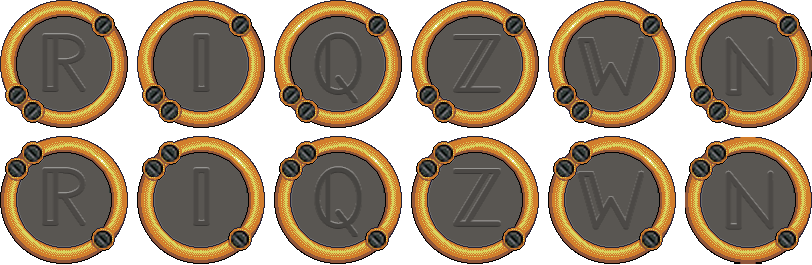
<style>
.page{position:relative;width:812px;height:265px;background:#595652}
.page>*{position:absolute;margin:0}
.t1{font:83.3px "jsMath-bbold10";letter-spacing:0.06em;color:#4c4946}
</style>
<div class="page">
<p class="t1" style="left:43px;top:34px;width:42px;height:57px">R</p>
<p class="t1" style="left:194px;top:34px;width:15px;height:57px">I</p>
<p class="t1" style="left:453px;top:35px;width:48px;height:57px">Z</p>
<p class="t1" style="left:578px;top:37px;width:66px;height:58px">W</p>
<p class="t1" style="left:726px;top:37px;width:47px;height:58px">N</p>
<p class="t1" style="left:43px;top:168px;width:42px;height:57px">R</p>
<p class="t1" style="left:194px;top:168px;width:15px;height:57px">I</p>
<p class="t1" style="left:453px;top:169px;width:48px;height:57px">Z</p>
<p class="t1" style="left:578px;top:171px;width:66px;height:58px">W</p>
<p class="t1" style="left:726px;top:171px;width:47px;height:58px">N</p>
</div>
